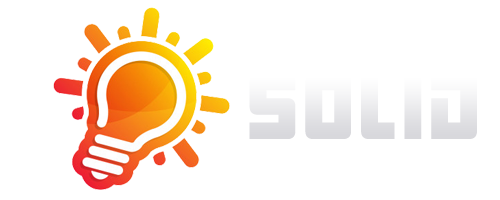
<style>
.page{position:relative;width:500px;height:200px;background:#ffffff}
.page>*{position:absolute;margin:0}
.t1{font:83.3px "AlienAndroid";letter-spacing:0.023em;color:#ebebed}
</style>
<div class="page">
<p class="t1" style="left:249px;top:73px;width:228px;height:66px">SOLID</p>
</div>
